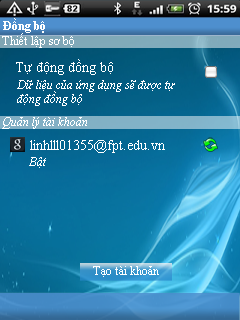
<style>
.page{position:relative;width:240px;height:320px}
.page>*{position:absolute;margin:0}
.t1{font:11.6px "TimesNewRomanPS-BoldMT";color:#ffffff}
.t2{font:11.6px "TimesNewRomanPSMT";color:#ffffff}
.t3{font:14px "TimesNewRomanPSMT";color:#ffffff}
.t4{font:11.6px "TimesNewRomanPS-ItalicMT";color:#ffffff}
</style>
<div class="page">
<p class="t1" style="left:3px;top:18px;width:42px;height:15px">Đồng bộ</p>
<p class="t2" style="left:2px;top:33px;width:72px;height:15px">Thiết lập sơ bộ</p>
<p class="t3" style="left:16px;top:59px;width:97px;height:16px">Tự động đồng bộ</p>
<p class="t4" style="left:17px;top:80px;width:158px;height:26px">Dữ liệu của ứng dụng sẽ được tự động đồng bộ</p>
<p class="t4" style="left:2px;top:117px;width:85px;height:12px">Quản lý tài khoản</p>
<p class="t3" style="left:30px;top:140px;width:135px;height:13px"><span class="t1"> </span>linhlll01355@fpt.edu.vn</p>
<p class="t4" style="left:29px;top:157px;width:17px;height:11px">Bật</p>
<p class="t2" style="left:93px;top:266px;width:66px;height:11px">Tạo tài khoản</p>
</div>
